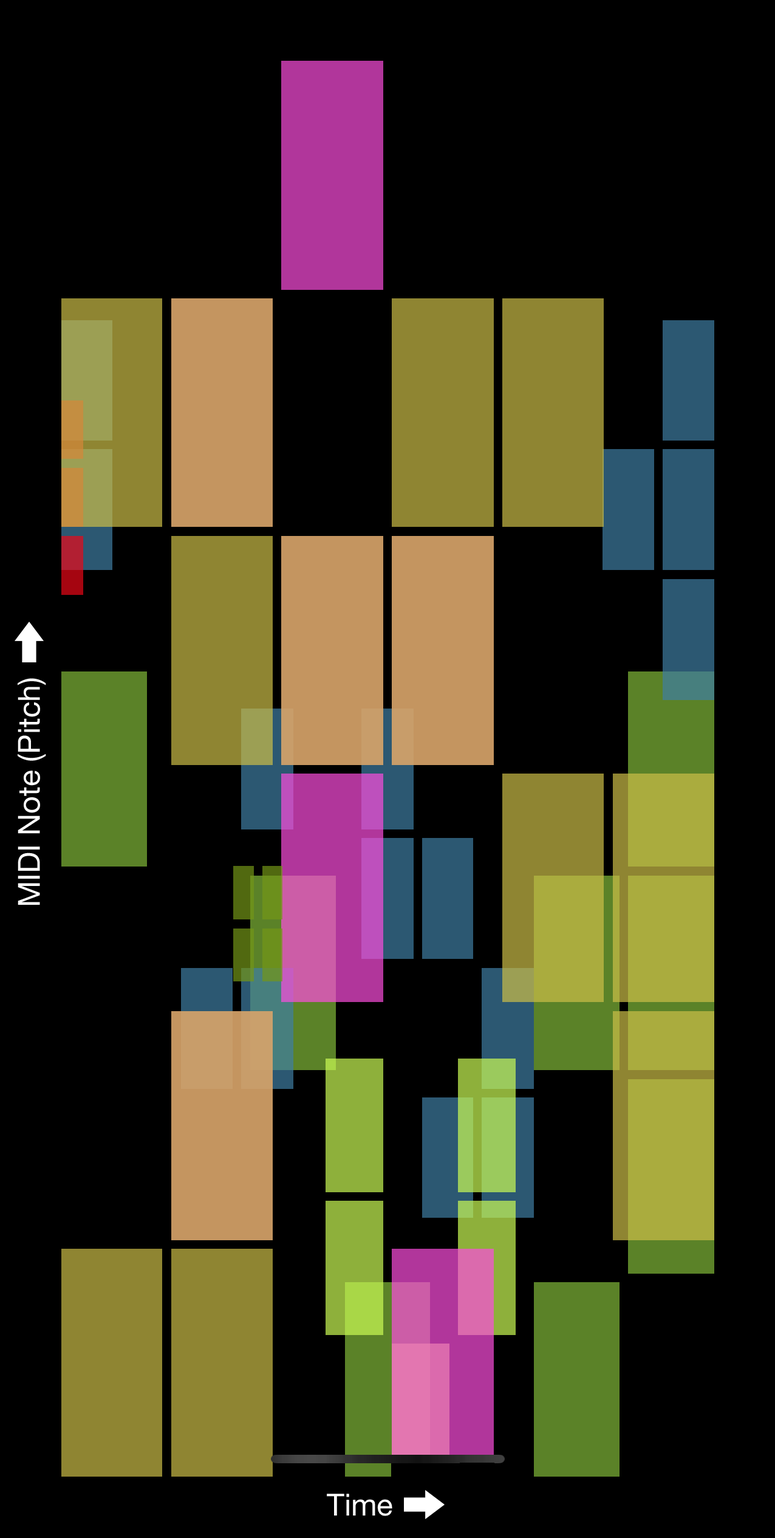
<style>
.page{position:relative;width:775px;height:1538px;background:#000000}
.page>*{position:absolute;margin:0}
.t1{font:30.4px "HelveticaNeue";color:#ffffff}
</style>
<div class="page">
<p class="t1" style="left:18px;top:678px;width:28px;height:227px;rotate:-90deg">MIDI Note (Pitch)</p>
<p class="t1" style="left:327px;top:1494px;width:66px;height:22px">Time</p>
</div>
